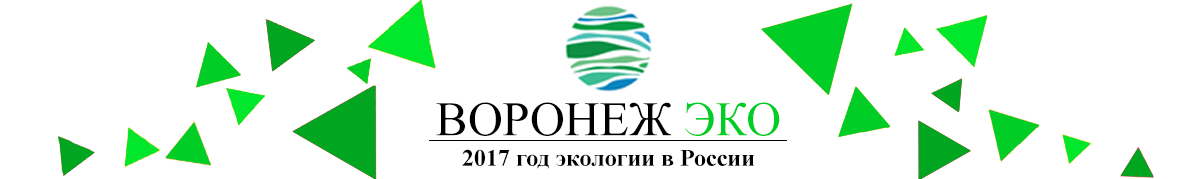
<style>
.page{position:relative;width:1200px;height:179px;background:#ffffff}
.page>*{position:absolute;margin:0}
.t1{font:48.3px "TimesNewRomanPSMT";color:#000000}
.t2{font:48.3px "TimesNewRomanPSMT";color:#00ce27}
.t3{font:23.7px "TimesNewRomanPS-BoldMT";color:#000000}
</style>
<div class="page">
<p class="t1" style="left:436px;top:102px;width:344px;height:34px">ВОРОНЕЖ <span class="t2">ЭКО</span></p>
<p class="t3" style="left:462px;top:149px;width:292px;height:20px">2017 год экологии в России</p>
</div>
